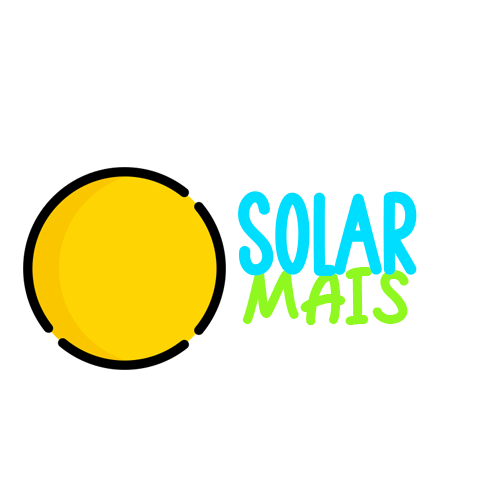
<style>
.page{position:relative;width:500px;height:500px;background:#ffffff}
.page>*{position:absolute;margin:0}
.t1{font:110px "SimpleSummerRegular";color:#00deff}
.t2{font:75px "AutumBright";color:#90f821}
</style>
<div class="page">
<p class="t1" style="left:238px;top:191px;width:179px;height:85px">SOLAR</p>
<p class="t2" style="left:242px;top:267px;width:167px;height:59px">MAIS</p>
</div>
